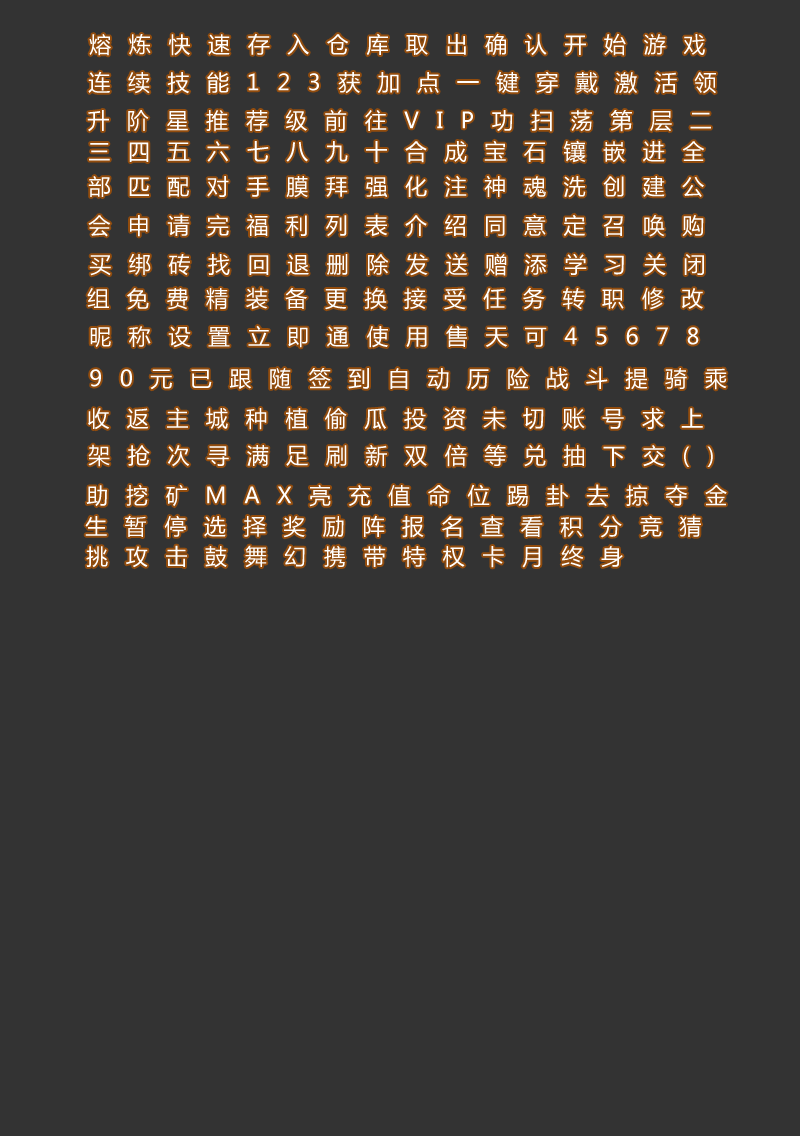
<style>
.page{position:relative;width:800px;height:1136px;background:#333333}
.page>*{position:absolute;margin:0}
.t1{font:22px "MicrosoftYaHei";letter-spacing:0.8em;color:#ffffff}
</style>
<div class="page">
<p class="t1" style="left:89px;top:33px;width:616px;height:23px">熔炼快速存入仓库取出确认开始游戏</p>
<p class="t1" style="left:88px;top:71px;width:628px;height:23px">连续技能123获加点一键穿戴激活领</p>
<p class="t1" style="left:87px;top:109px;width:624px;height:23px">升阶星推荐级前往VIP功扫荡第层二</p>
<p class="t1" style="left:89px;top:140px;width:616px;height:23px">三四五六七八九十合成宝石镶嵌进全</p>
<p class="t1" style="left:88px;top:175px;width:616px;height:23px">部匹配对手膜拜强化注神魂洗创建公</p>
<p class="t1" style="left:88px;top:214px;width:616px;height:23px">会申请完福利列表介绍同意定召唤购</p>
<p class="t1" style="left:89px;top:253px;width:615px;height:23px">买绑砖找回退删除发送赠添学习关闭</p>
<p class="t1" style="left:87px;top:287px;width:616px;height:23px">组免费精装备更换接受任务转职修改</p>
<p class="t1" style="left:90px;top:325px;width:609px;height:23px">昵称设置立即通使用售天可45678</p>
<p class="t1" style="left:90px;top:368px;width:637px;height:22px">90元已跟随签到自动历险战斗提骑乘</p>
<p class="t1" style="left:88px;top:407px;width:615px;height:23px">收返主城种植偷瓜投资未切账号求上</p>
<p class="t1" style="left:88px;top:444px;width:625px;height:23px">架抢次寻满足刷新双倍等兑抽下交()</p>
<p class="t1" style="left:86px;top:484px;width:641px;height:23px">助挖矿MAX亮充值命位踢卦去掠夺金</p>
<p class="t1" style="left:85px;top:515px;width:616px;height:23px">生暂停选择奖励阵报名查看积分竞猜</p>
<p class="t1" style="left:86px;top:545px;width:537px;height:23px">挑攻击鼓舞幻携带特权卡月终身</p>
</div>
